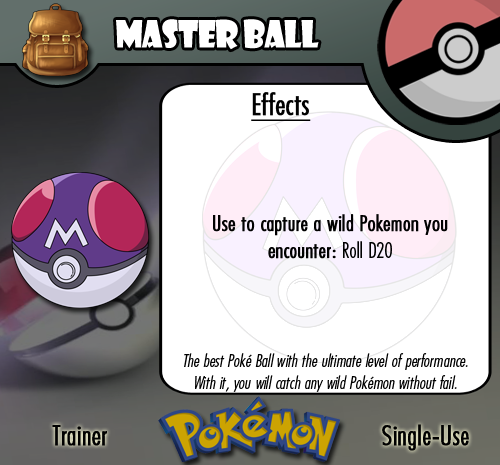
<style>
.page{position:relative;width:500px;height:465px;background:#ffffff}
.page>*{position:absolute;margin:0}
.t1{font:36.7px "ShowcardGothic-Reg";letter-spacing:-0.025em;color:#ffffff;scale:0.91 1}
.t2{font:22.2px "FuturaCondensedBQ-Light";color:#010101;font-weight:bold}
.t3{font:27.8px "FuturaCondensedBQ-Light";color:#010101;font-weight:bold}
.t4{font:30.6px "FuturaCondensedBQ-Light";color:#010101;font-weight:bold;text-decoration:underline}
.t5{font:22.2px "FuturaCondensedBQ-Light";color:#010101}
.t6{font:18.1px "FuturaCondensedBQ-Light";color:#010101;font-style:italic}
</style>
<div class="page">
<p class="t1" style="left:116px;top:19px;width:203px;height:31px">Master Ball</p>
<p class="t2" style="left:213px;top:92px;width:235px;height:167px"><span class="t3">  </span><span class="t4">Effects<br><br><br><br><br><br><br></span>Use to capture a wild Pokemon you encounter: <span class="t5">Roll D20</span></p>
<p class="t6" style="left:184px;top:353px;width:284px;height:39px;text-align:center">The best Poké Ball with the ultimate level of performance. With it, you will catch any wild Pokémon without fail.</p>
<p class="t3" style="left:52px;top:425px;width:55px;height:21px">Trainer</p>
<p class="t3" style="left:382px;top:424px;width:87px;height:27px">Single-Use</p>
</div>
